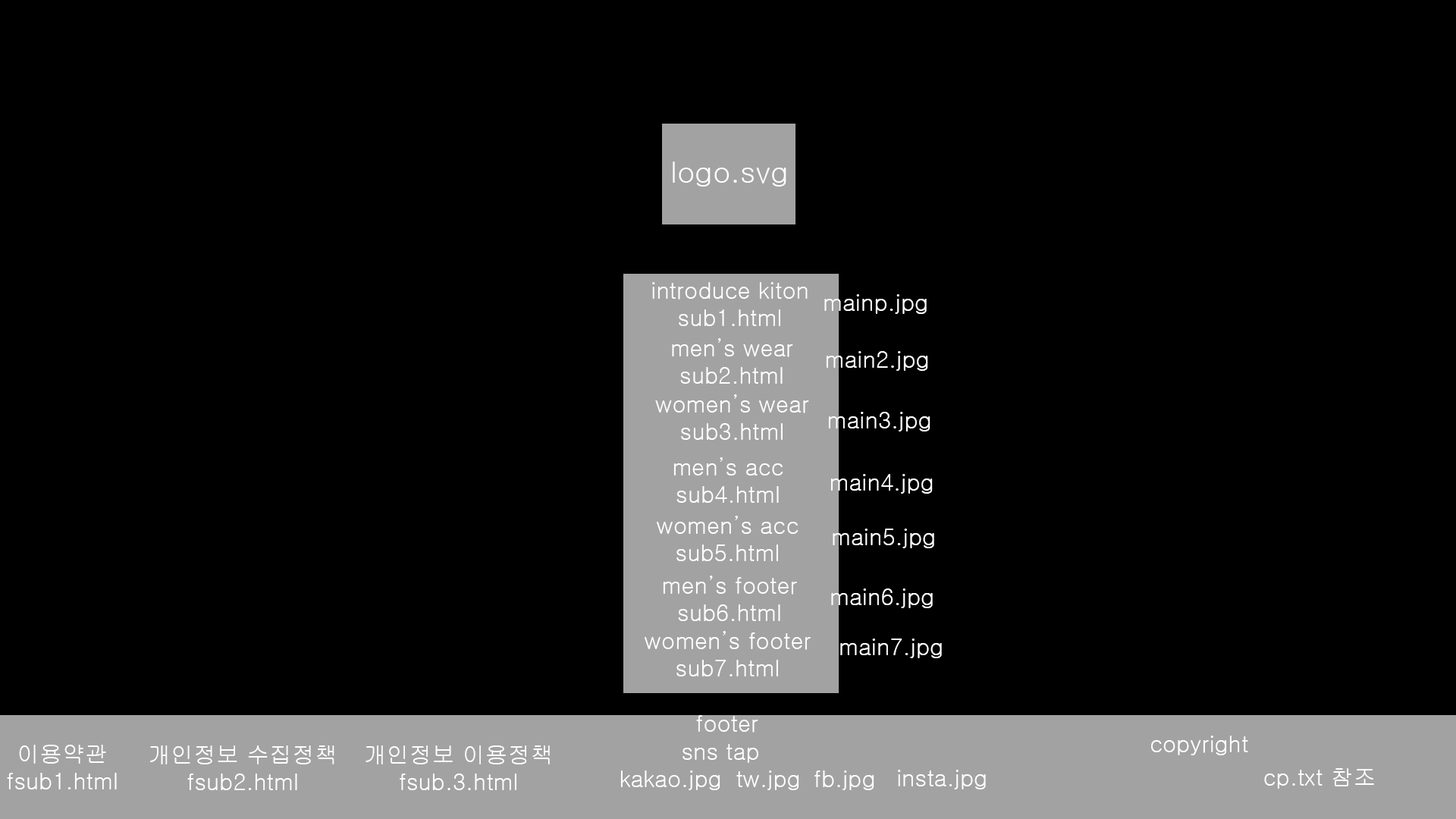
<style>
.page{position:relative;width:1456px;height:819px;background:#000000}
.page>*{position:absolute;margin:0}
.t1{font:29.6px "Gulim";color:#ffffff}
.t2{font:22.7px "Gulim";color:#ffffff}
</style>
<div class="page">
<p class="t1" style="left:673px;top:162px;width:113px;height:25px">logo.svg</p>
<p class="t2" style="left:652px;top:282px;width:156px;height:44px;text-align:center">introduce kiton<br>sub1.html</p>
<p class="t2" style="left:824px;top:294px;width:103px;height:20px">mainp.jpg</p>
<p class="t2" style="left:672px;top:338px;width:121px;height:46px;text-align:center">men’s wear<br>sub2.html</p>
<p class="t2" style="left:826px;top:351px;width:102px;height:20px">main2.jpg</p>
<p class="t2" style="left:655px;top:394px;width:154px;height:46px;text-align:center">women’s wear<br>sub3.html</p>
<p class="t2" style="left:828px;top:412px;width:102px;height:19px">main3.jpg</p>
<p class="t2" style="left:673px;top:457px;width:110px;height:46px;text-align:center">men’s acc<br>sub4.html</p>
<p class="t2" style="left:830px;top:474px;width:103px;height:20px">main4.jpg</p>
<p class="t2" style="left:657px;top:516px;width:142px;height:45px;text-align:center">women’s acc<br>sub5.html</p>
<p class="t2" style="left:833px;top:529px;width:101px;height:19px">main5.jpg</p>
<p class="t2" style="left:663px;top:576px;width:134px;height:45px;text-align:center">men’s footer<br>sub6.html</p>
<p class="t2" style="left:831px;top:588px;width:102px;height:20px">main6.jpg</p>
<p class="t2" style="left:645px;top:631px;width:166px;height:45px;text-align:center">women’s footer<br>sub7.html</p>
<p class="t2" style="left:840px;top:639px;width:102px;height:19px">main7.jpg</p>
<p class="t2" style="left:696px;top:715px;width:62px;height:18px">footer</p>
<p class="t2" style="left:1151px;top:736px;width:97px;height:19px">copyright</p>
<p class="t2" style="left:7px;top:745px;width:110px;height:44px;text-align:center">이용약관<br>fsub1.html</p>
<p class="t2" style="left:150px;top:745px;width:184px;height:45px;text-align:center">개인정보 수집정책<br>fsub2.html</p>
<p class="t2" style="left:366px;top:745px;width:184px;height:45px;text-align:center">개인정보 이용정책<br>fsub.3.html</p>
<p class="t2" style="left:682px;top:744px;width:76px;height:19px">sns tap</p>
<p class="t2" style="left:620px;top:770px;width:100px;height:20px">kakao.jpg</p>
<p class="t2" style="left:736px;top:770px;width:63px;height:20px">tw.jpg</p>
<p class="t2" style="left:814px;top:770px;width:60px;height:20px">fb.jpg</p>
<p class="t2" style="left:898px;top:770px;width:88px;height:19px">insta.jpg</p>
<p class="t2" style="left:1264px;top:768px;width:110px;height:21px">cp.txt 참조</p>
</div>
